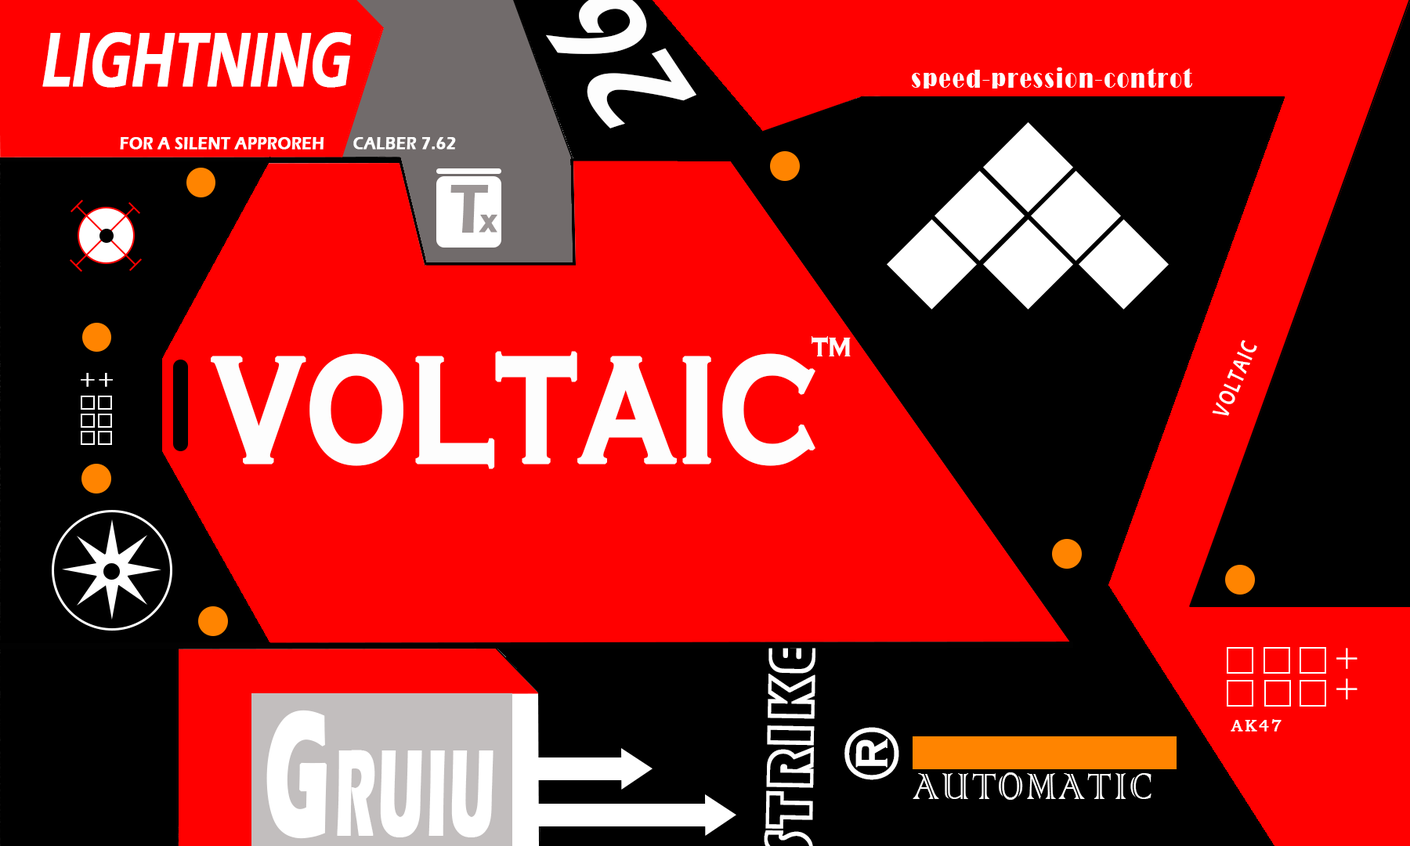
<style>
.page{position:relative;width:1410px;height:846px;background:#ff0000}
.page>*{position:absolute;margin:0}
.t1{font:78.3px "ErasITC-Demi";letter-spacing:0.012em;color:#ffffff;font-weight:bold;font-style:italic;scale:0.67 1}
.t2{font:27.4px "Broadway";letter-spacing:0.096em;color:#fdfdfd;scale:0.71 1}
.t3{font:27.4px "FZSTK--GBK1-0";color:#fdfdfd;scale:0.71 1}
.t4{font:17.6px "ErasITC-Demi";letter-spacing:0.012em;color:#ffffff;font-weight:bold;scale:0.89 1}
.t5{font:70.5px "ErasITC-Demi";letter-spacing:0.012em;color:#9c9696;font-weight:bold;scale:0.89 1}
.t6{font:35.2px "ErasITC-Demi";letter-spacing:0.012em;color:#9c9696;font-weight:bold;scale:0.89 1}
.t7{font:48.9px "CopperplateGothic-Bold";letter-spacing:0.06em;color:#fdfdfd;scale:0.8 1}
.t8{font:23.5px "ErasITC-Demi";letter-spacing:0.12em;color:#ffffff;scale:0.67 1}
.t9{font:156.6px "CopperplateGothic-Bold";color:#fdfdfd;font-weight:bold;scale:0.75 1}
.t10{font:24.5px "ColonnaMT";letter-spacing:0.06em;color:#ffffff;font-weight:bold}
.t11{font:39.2px "ColonnaMT";letter-spacing:0.12em;color:#fffefe}
.t12{font:179.5px "ErasITC-Bold";letter-spacing:0.036em;color:#ffffff;font-variant:small-caps;font-weight:bold;scale:0.45 1}
.t13{font:16.3px "BookmanOldStyle";letter-spacing:0.12em;color:#fffefe;font-weight:bold}
.t14{font:78.3px "CopperplateGothic-Bold";letter-spacing:0.036em;color:#ffffff;scale:0.83 1}
.t15{font:48.9px "ColonnaMT";letter-spacing:0.06em;color:#fdfdfd;scale:0.8 1}
</style>
<div class="page">
<p class="t1" style="left:42px;top:32px;width:310px;height:56px">LIGHTNING</p>
<p class="t2" style="left:912px;top:67px;width:280px;height:22px"><span class="t3">                    </span>speed-pression-controt</p>
<p class="t4" style="left:120px;top:137px;width:204px;height:13px">FOR A SILENT APPROREH</p>
<p class="t4" style="left:353px;top:137px;width:103px;height:13px">CALBER 7.62</p>
<p class="t5" style="left:450px;top:185px;width:39px;height:48px">T</p>
<p class="t6" style="left:479px;top:215px;width:18px;height:18px">x</p>
<p class="t7" style="left:811px;top:336px;width:40px;height:20px">™</p>
<p class="t8" style="left:1212px;top:340px;width:45px;height:76px;rotate:-67deg">VOLTAIC</p>
<p class="t9" style="left:211px;top:351px;width:604px;height:118px">VOLTAIC</p>
<p class="t10" style="left:81px;top:373px;width:32px;height:14px">++</p>
<p class="t11" style="left:1336px;top:648px;width:21px;height:51px">++</p>
<p class="t12" style="left:266px;top:710px;width:227px;height:129px">Gruiu</p>
<p class="t13" style="left:1230px;top:719px;width:51px;height:13px">AK47</p>
<p class="t14" style="left:844px;top:727px;width:55px;height:53px;rotate:-90deg">®</p>
<p class="t15" style="left:912px;top:772px;width:239px;height:28px">AUTOMATIC</p>
</div>
